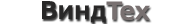
<style>
.page{position:relative;width:189px;height:24px;background:#ffffff}
.page>*{position:absolute;margin:0}
.t1{font:24px "MeiryoUI-Bold";color:#282727}
.t2{font:24px "MeiryoUI-Bold";color:#787070}
</style>
<div class="page">
<p class="t1" style="left:42px;top:1px;width:108px;height:22px">Винд<span class="t2">Тех</span></p>
</div>
